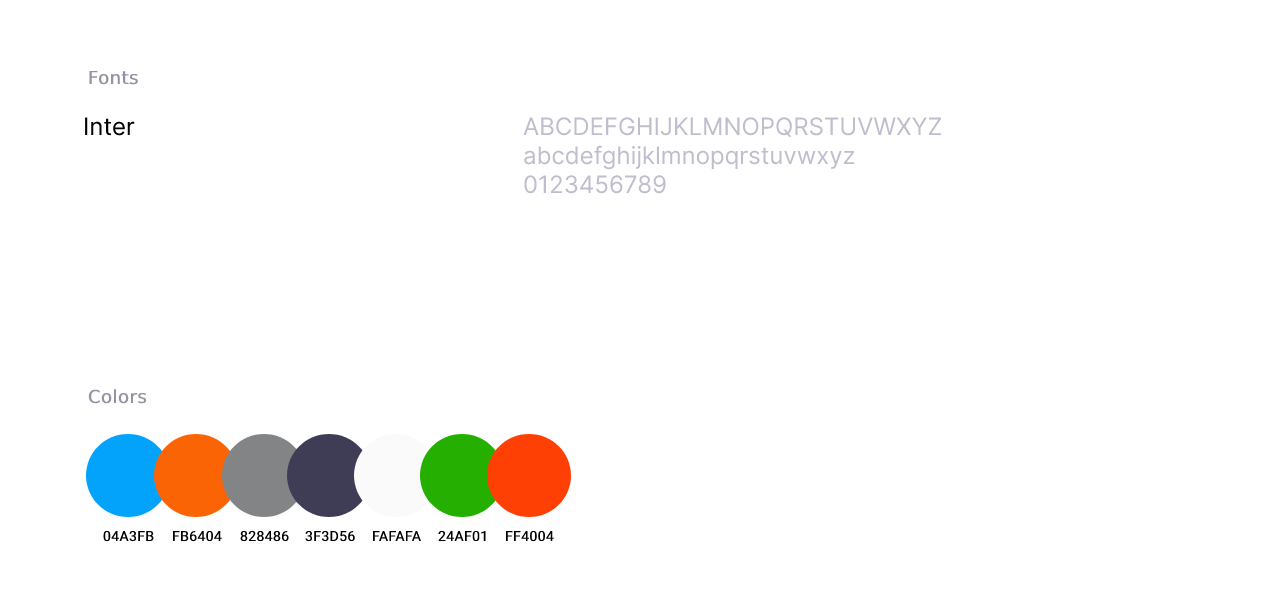
<style>
.page{position:relative;width:1280px;height:600px;background:#ffffff}
.page>*{position:absolute;margin:0}
.t1{font:18px "DejaVuSans";color:#9393a4;font-weight:bold}
.t2{font:24px "Inter-Regular";color:#000000}
.t3{font:24px "Inter-Regular";color:#bebecf}
.t4{font:14px "Roboto-Regular";color:#000000;font-weight:bold}
</style>
<div class="page">
<p class="t1" style="left:89px;top:70px;width:49px;height:15px">Fonts</p>
<p class="t2" style="left:85px;top:117px;width:50px;height:19px">Inter</p>
<p class="t3" style="left:523px;top:117px;width:419px;height:77px">ABCDEFGHIJKLMNOPQRSTUVWXYZ<br>abcdefghijklmnopqrstuvwxyz<br>0123456789</p>
<p class="t1" style="left:88px;top:389px;width:59px;height:15px">Colors</p>
<p class="t4" style="left:103px;top:530px;width:51px;height:12px">04A3FB</p>
<p class="t4" style="left:172px;top:530px;width:50px;height:12px">FB6404</p>
<p class="t4" style="left:240px;top:530px;width:49px;height:12px">828486</p>
<p class="t4" style="left:305px;top:530px;width:50px;height:12px">3F3D56</p>
<p class="t4" style="left:372px;top:531px;width:50px;height:10px">FAFAFA</p>
<p class="t4" style="left:438px;top:530px;width:48px;height:12px">24AF01</p>
<p class="t4" style="left:505px;top:530px;width:49px;height:12px">FF4004</p>
</div>
